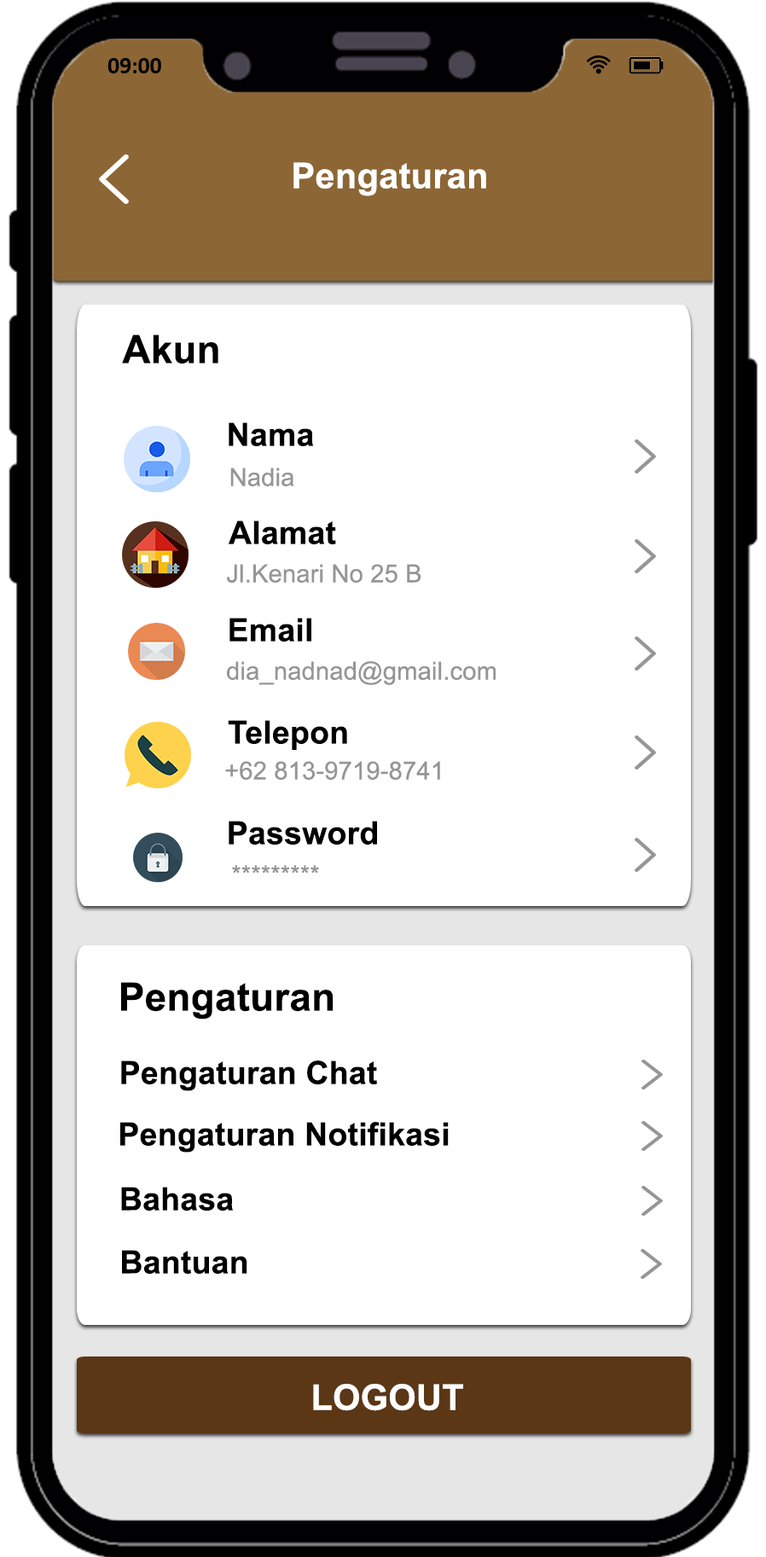
<style>
.page{position:relative;width:766px;height:1557px;background:#ffffff}
.page>*{position:absolute;margin:0}
.t1{font:23.6px "Calibri-Bold";color:#000000}
.t2{font:35.5px "Arial-BoldMT";letter-spacing:0.005em;color:#ffffff}
.t3{font:39.1px "Arial-BoldMT";letter-spacing:0.005em;color:#000000}
.t4{font:32px "Arial-BoldMT";letter-spacing:0.005em;color:#000000}
.t5{font:24.9px "ArialMT";letter-spacing:0.005em;color:#959595}
</style>
<div class="page">
<p class="t1" style="left:107px;top:58px;width:54px;height:15px">09:00</p>
<p class="t2" style="left:293px;top:162px;width:193px;height:34px">Pengaturan</p>
<p class="t3" style="left:122px;top:334px;width:96px;height:30px">Akun</p>
<p class="t4" style="left:229px;top:422px;width:85px;height:24px">Nama</p>
<p class="t5" style="left:230px;top:467px;width:64px;height:19px">Nadia</p>
<p class="t4" style="left:229px;top:520px;width:107px;height:24px">Alamat</p>
<p class="t5" style="left:227px;top:564px;width:194px;height:19px">Jl.Kenari No 25 B</p>
<p class="t4" style="left:229px;top:618px;width:82px;height:23px">Email</p>
<p class="t5" style="left:227px;top:661px;width:269px;height:24px">dia_nadnad@gmail.com</p>
<p class="t4" style="left:228px;top:720px;width:119px;height:30px">Telepon</p>
<p class="t5" style="left:225px;top:761px;width:215px;height:19px">+62 813-9719-8741</p>
<p class="t4" style="left:229px;top:821px;width:148px;height:23px">Password</p>
<p class="t5" style="left:232px;top:865px;width:87px;height:8px">*********</p>
<p class="t3" style="left:121px;top:982px;width:213px;height:37px">Pengaturan</p>
<p class="t4" style="left:121px;top:1060px;width:256px;height:31px">Pengaturan Chat</p>
<p class="t4" style="left:120px;top:1122px;width:329px;height:30px">Pengaturan Notifikasi</p>
<p class="t4" style="left:121px;top:1187px;width:112px;height:23px">Bahasa</p>
<p class="t4" style="left:122px;top:1250px;width:125px;height:24px">Bantuan</p>
<p class="t2" style="left:313px;top:1384px;width:150px;height:27px">LOGOUT</p>
</div>
